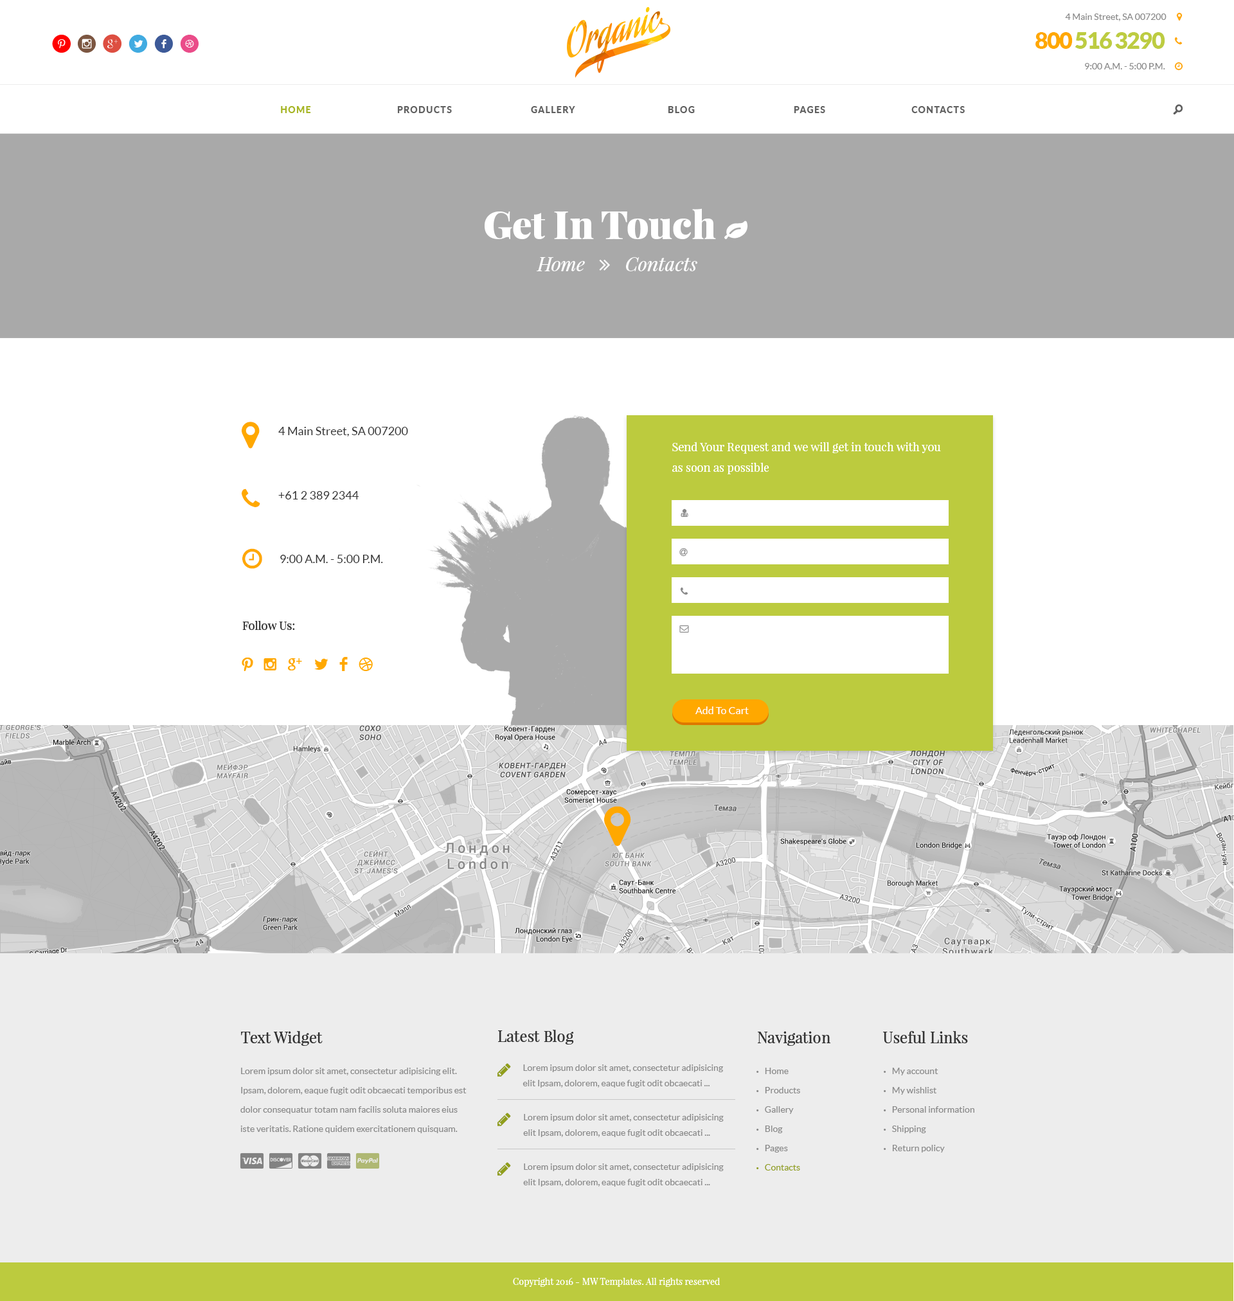
<style>
.page{position:relative;width:1234px;height:1301px;background:#ffffff}
.page>*{position:absolute;margin:0}
.t1{font:9px "Lato-Regular";color:#898989}
.t2{font:25.7px "SocialicoPlus";letter-spacing:0.2em;color:#ff0000}
.t3{font:25.7px "SocialicoPlus";letter-spacing:0.2em;color:#7c5641}
.t4{font:25.7px "SocialicoPlus";letter-spacing:0.2em;color:#dd4e41}
.t5{font:25.7px "Socialico";letter-spacing:0.2em;color:#41abe1}
.t6{font:25.7px "Socialico";letter-spacing:0.2em;color:#3d5a98}
.t7{font:25.7px "Socialico";letter-spacing:0.2em;color:#ea4c89}
.t8{font:23.1px "Lato-Black";letter-spacing:-0.05em;color:#bdcc41}
.t9{font:23.1px "Lato-Black";letter-spacing:-0.05em;color:#ffa800}
.t10{font:9px "Lato-Heavy";letter-spacing:0.1em;color:#a6b525;text-transform:uppercase}
.t11{font:9px "Lato-Heavy";letter-spacing:0.1em;color:#606060;text-transform:uppercase}
.t12{font:19.3px "SocialicoPlus";color:#606060;text-transform:uppercase}
.t13{font:11.6px "Lato-Regular";color:#333333}
.t14{font:11.6px/15.4px "PlayfairDisplay-Regular";color:#ffffff}
.t15{font:11.6px "PlayfairDisplay-Regular";color:#333333}
.t16{font:23.1px "SocialicoPlus";letter-spacing:0.4em;color:#ffa800;text-transform:uppercase}
.t17{font:23.1px "Socialico";letter-spacing:0.4em;color:#ffa800;text-transform:uppercase}
.t18{font:10.3px "Lato-Regular";color:#ffffff}
.t19{font:15.4px "PlayfairDisplay-Regular";color:#333333}
.t20{font:9px/19.3px "Lato-Regular";color:#898989}
.t21{font:9px/15.4px "Lato-Regular";color:#898989}
.t22{font:9px/19.3px "MyriadPro-Regular";color:#898989;text-transform:uppercase}
.t23{font:9px/19.3px "MyriadPro-Regular";color:#909e1a;text-transform:uppercase}
.t24{font:9px/19.3px "Lato-Regular";color:#909e1a}
.t25{font:9px "PlayfairDisplay-Regular";color:#ffffff}
</style>
<div class="page">
<p class="t1" style="left:1065px;top:14px;width:102px;height:7px">4 Main Street, SA 007200</p>
<p class="t2" style="left:52px;top:34px;width:147px;height:19px">p<span class="t3">i</span><span class="t4">h</span><span class="t5">l</span><span class="t6">f</span><span class="t7">d</span></p>
<p class="t8" style="left:1036px;top:32px;width:130px;height:17px"><span class="t9">800</span> 516 3290</p>
<p class="t1" style="left:1085px;top:63px;width:81px;height:6px">9:00 A.M. - 5:00 P.M.</p>
<p class="t10" style="left:281px;top:106px;width:30px;height:7px">Home</p>
<p class="t11" style="left:397px;top:106px;width:55px;height:7px">Products</p>
<p class="t11" style="left:531px;top:106px;width:44px;height:7px">Gallery</p>
<p class="t11" style="left:668px;top:106px;width:27px;height:7px">Blog</p>
<p class="t11" style="left:794px;top:106px;width:31px;height:7px">Pages</p>
<p class="t11" style="left:912px;top:106px;width:53px;height:7px">Contacts</p>
<p class="t12" style="left:1173px;top:104px;width:11px;height:10px">o</p>
<p class="t13" style="left:278px;top:427px;width:130px;height:10px">4 Main Street, SA 007200</p>
<p class="t14" style="left:672px;top:442px;width:269px;height:32px">Send Your Request and we will get in touch with you<br>as soon as possible</p>
<p class="t13" style="left:278px;top:491px;width:81px;height:9px">+61 2 389 2344</p>
<p class="t13" style="left:280px;top:555px;width:103px;height:8px">9:00 A.M. - 5:00 P.M.</p>
<p class="t15" style="left:242px;top:620px;width:53px;height:10px">Follow Us:</p>
<p class="t16" style="left:242px;top:657px;width:131px;height:14px">pih<span class="t17">lfd</span></p>
<p class="t18" style="left:696px;top:706px;width:53px;height:8px">Add To Cart</p>
<p class="t19" style="left:241px;top:1031px;width:82px;height:15px">Text Widget</p>
<p class="t19" style="left:498px;top:1030px;width:76px;height:15px">Latest Blog</p>
<p class="t19" style="left:758px;top:1031px;width:73px;height:15px">Navigation</p>
<p class="t19" style="left:883px;top:1031px;width:85px;height:12px">Useful Links</p>
<p class="t20" style="left:240px;top:1068px;width:227px;height:65px">Lorem ipsum dolor sit amet, consectetur adipisicing elit. Ipsam, dolorem, eaque fugit odit obcaecati temporibus est dolor consequatur totam nam facilis soluta maiores eius iste veritatis. Ratione quidem exercitationem quisquam.</p>
<p class="t21" style="left:523px;top:1065px;width:201px;height:23px">Lorem ipsum dolor sit amet, consectetur adipisicing elit Ipsam, dolorem, eaque fugit odit obcaecati ...</p>
<p class="t20" style="left:757px;top:1068px;width:43px;height:103px"><span class="t22">•   </span>Home<br><span class="t22">•   </span>Products<br><span class="t22">•   </span>Gallery<br><span class="t22">•   </span>Blog<br><span class="t22">•   </span>Pages<br><span class="t23">•   </span><span class="t24">Contacts</span></p>
<p class="t20" style="left:884px;top:1068px;width:91px;height:85px"><span class="t22">•   </span>My account<br><span class="t22">•   </span>My wishlist<br><span class="t22">•   </span>Personal information<br><span class="t22">•   </span>Shipping<br><span class="t22">•   </span>Return policy</p>
<p class="t21" style="left:523px;top:1114px;width:201px;height:23px">Lorem ipsum dolor sit amet, consectetur adipisicing elit Ipsam, dolorem, eaque fugit odit obcaecati ...</p>
<p class="t21" style="left:523px;top:1164px;width:201px;height:23px">Lorem ipsum dolor sit amet, consectetur adipisicing elit Ipsam, dolorem, eaque fugit odit obcaecati ...</p>
<p class="t25" style="left:513px;top:1277px;width:207px;height:10px">Copyright 2016 - MW Templates. All rights reserved</p>
</div>
